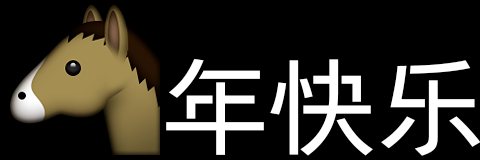
<style>
.page{position:relative;width:480px;height:160px;background:#000000}
.page>*{position:absolute;margin:0}
.t1{font:108px "YFstencil1500R-maxgap";color:#ffffff}
</style>
<div class="page">
<p class="t1" style="left:166px;top:59px;width:315px;height:97px">年快乐</p>
</div>
